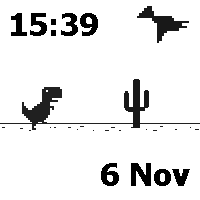
<style>
.page{position:relative;width:200px;height:200px;background:#ffffff}
.page>*{position:absolute;margin:0}
.t1{font:31.3px "Tahoma-Bold";color:#000000}
</style>
<div class="page">
<p class="t1" style="left:11px;top:13px;width:87px;height:23px">15:39</p>
<p class="t1" style="left:101px;top:163px;width:89px;height:23px">6 Nov</p>
</div>
